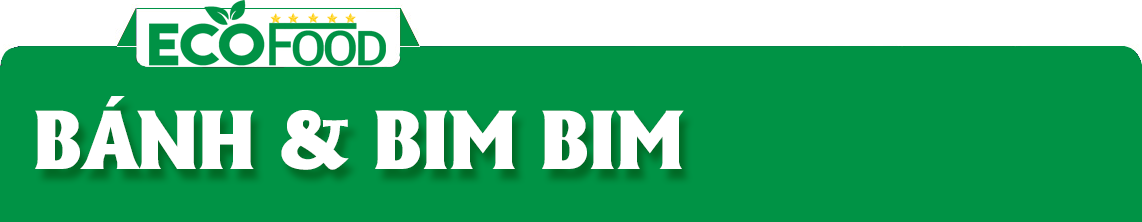
<style>
.page{position:relative;width:1142px;height:222px;background:#009345}
.page>*{position:absolute;margin:0}
.t1{font:81px "UTM-Alberta-Heavy";color:#ffffff}
</style>
<div class="page">
<p class="t1" style="left:35px;top:96px;width:649px;height:74px">BÁNH &amp; BIM BIM</p>
</div>
